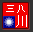
<style>
.page{position:relative;width:33px;height:32px;background:#f20000}
.page>*{position:absolute;margin:0}
.t1{font:10.4px "SimSun";color:#ffffff}
.t2{font:11.7px "SimSun";color:#ffffff}
</style>
<div class="page">
<p class="t1" style="left:6px;top:5px;width:19px;height:8px">三八</p>
<p class="t2" style="left:16px;top:15px;width:11px;height:12px">川</p>
</div>
